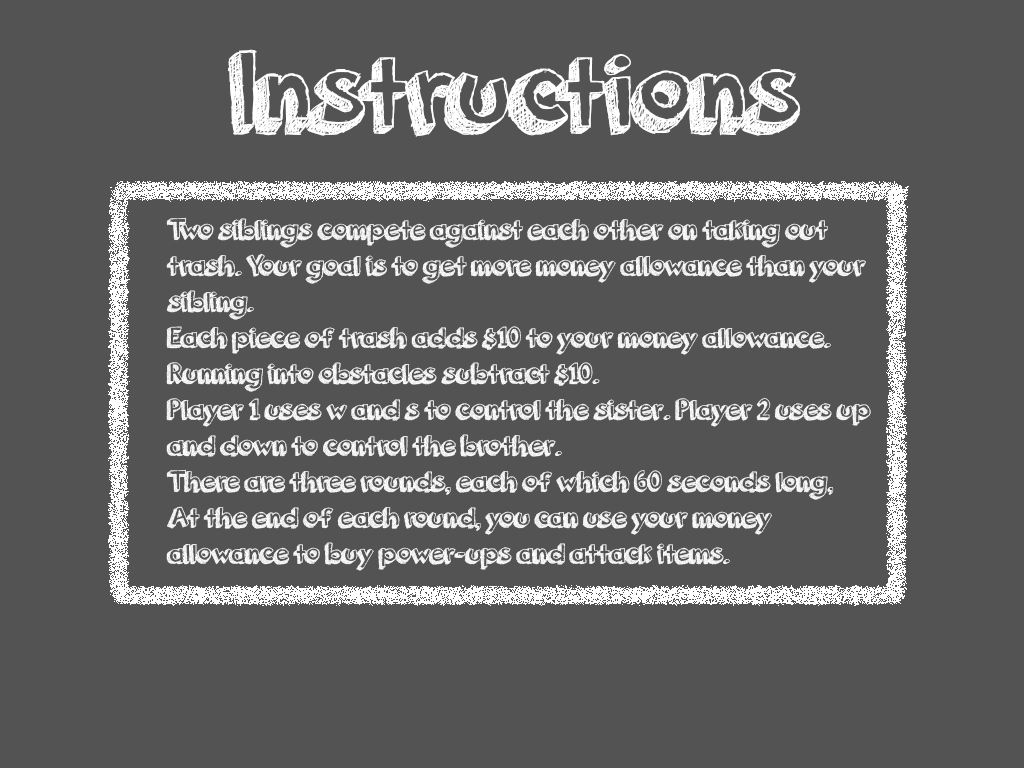
<style>
.page{position:relative;width:1024px;height:768px;background:#535353}
.page>*{position:absolute;margin:0}
.t1{font:120px "orangejuice";color:#ffffff}
.t2{font:30px "orangejuice";color:#ffffff}
</style>
<div class="page">
<p class="t1" style="left:227px;top:49px;width:574px;height:88px">Instructions</p>
<p class="t2" style="left:166px;top:217px;width:705px;height:354px">Two siblings compete against each other on taking out<br>trash. Your goal is to get more money allowance than your<br>sibling.<br>Each piece of trash adds $10 to your money allowance.<br>Running into obstacles subtract $10.<br>Player 1 uses w and s to control the sister. Player 2 uses up<br>and down to control the brother.<br>There are three rounds, each of which 60 seconds long,<br>At the end of each round, you can use your money<br>allowance to buy power-ups and attack items.</p>
</div>
